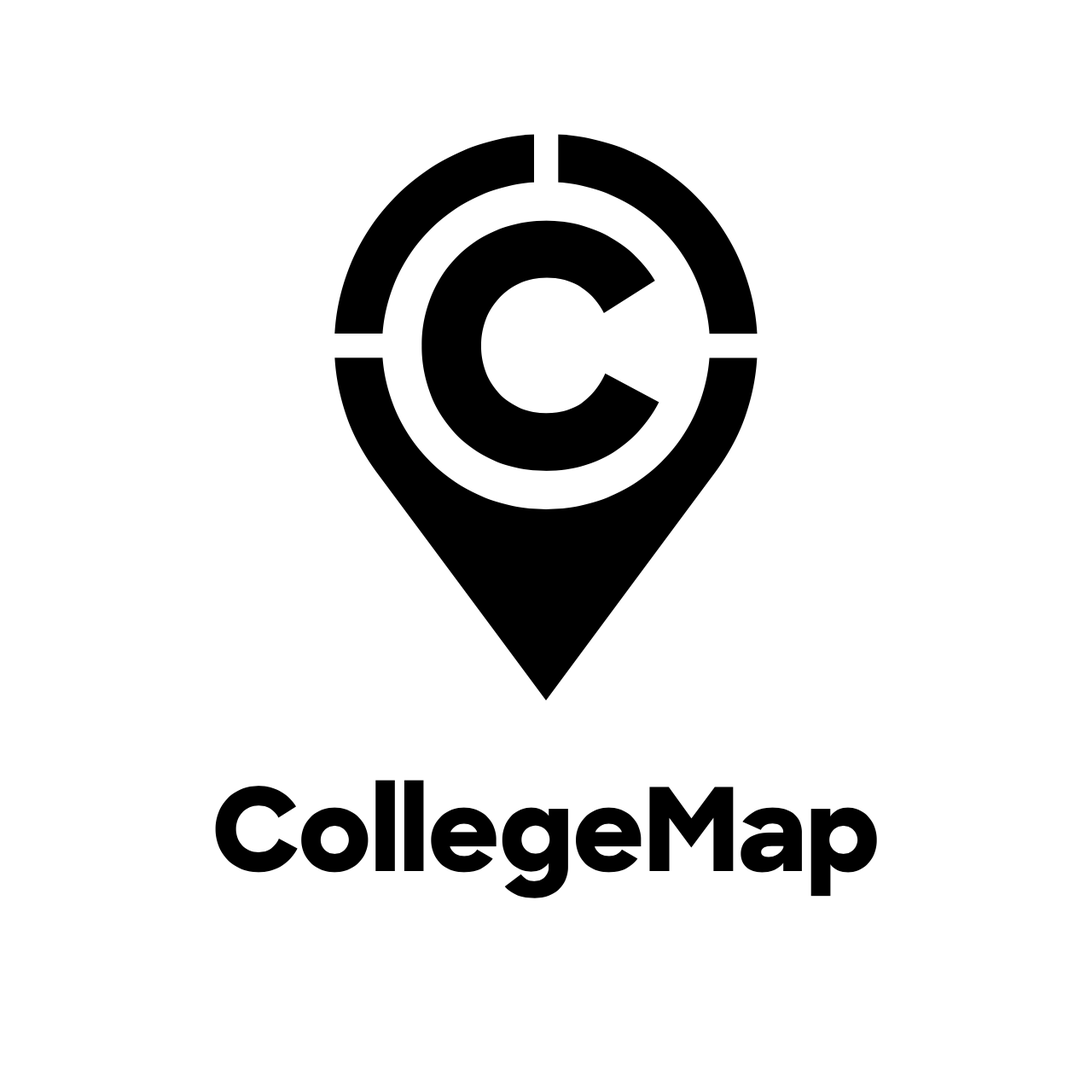
<style>
.page{position:relative;width:1092px;height:1092px;background:#ffffff}
.page>*{position:absolute;margin:0}
.t1{font:333.6px "SharpSans-Extrabold";letter-spacing:-0.01em;color:#000000}
.t2{font:115.2px "SharpSans-Extrabold";letter-spacing:-0.01em;color:#000000}
</style>
<div class="page">
<p class="t1" style="left:421px;top:220px;width:238px;height:251px">C</p>
<p class="t2" style="left:215px;top:780px;width:662px;height:118px">CollegeMap</p>
</div>
